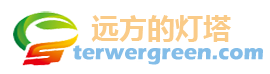
<style>
.page{position:relative;width:270px;height:74px;background:#ffffff}
.page>*{position:absolute;margin:0}
.t1{font:28px "MicrosoftYaHei-Bold";color:#facb88}
.t2{font:22px "ErasITC-Bold";color:#83bde8}
</style>
<div class="page">
<p class="t1" style="left:91px;top:15px;width:140px;height:27px">远方的灯塔</p>
<p class="t2" style="left:73px;top:45px;width:190px;height:20px">terwergreen.com</p>
</div>
